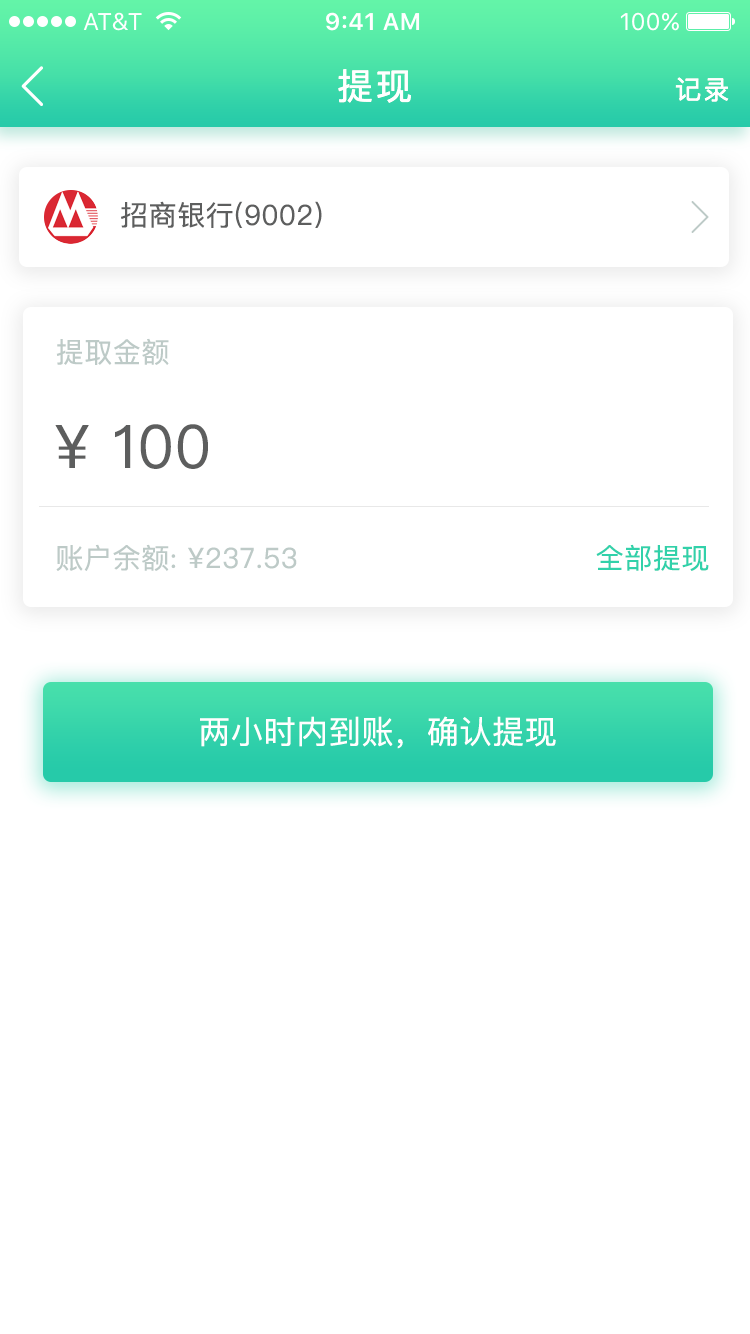
<style>
.page{position:relative;width:750px;height:1334px;background:#ffffff}
.page>*{position:absolute;margin:0}
.t1{font:36px "PingFangSC-Regular";letter-spacing:0.08em;color:#ffffff}
.t2{font:26px "PingFangSC-Regular";letter-spacing:0.08em;color:#ffffff}
.t3{font:28px "PingFangSC-Regular";letter-spacing:0.02em;color:#5d5e5e}
.t4{font:28px "PingFangSC-Regular";letter-spacing:0.02em;color:#bdcac7}
.t5{font:60px "PingFangSC-Regular";letter-spacing:0.02em;color:#5d5e5e}
.t6{font:28px "PingFangSC-Regular";letter-spacing:0.02em;color:#31d1aa}
.t7{font:32px "PingFangSC-Regular";letter-spacing:0.02em;color:#ffffff}
</style>
<div class="page">
<p class="t1" style="left:338px;top:69px;width:73px;height:34px">提现</p>
<p class="t2" style="left:675px;top:77px;width:54px;height:25px">记录</p>
<p class="t3" style="left:121px;top:201px;width:201px;height:27px">招商银行(9002)</p>
<p class="t4" style="left:56px;top:338px;width:113px;height:27px">提取金额</p>
<p class="t5" style="left:55px;top:424px;width:153px;height:45px">¥ 100</p>
<p class="t4" style="left:56px;top:544px;width:241px;height:27px">账户余额: ¥237.53</p>
<p class="t6" style="left:596px;top:544px;width:113px;height:27px">全部提现</p>
<p class="t7" style="left:200px;top:716px;width:356px;height:33px">两小时内到账，确认提现</p>
</div>
